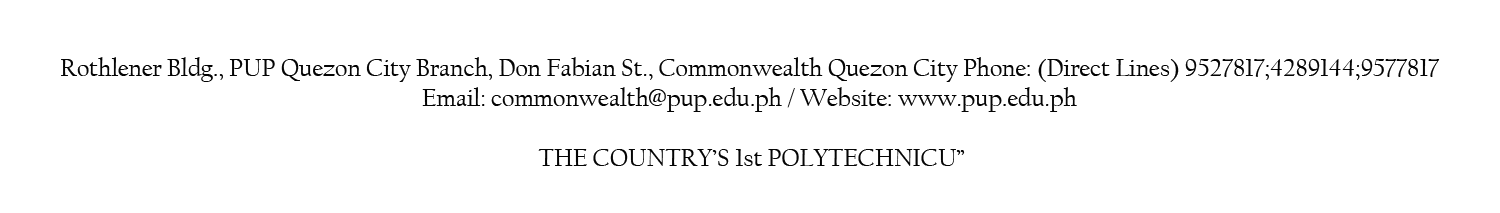
<style>
.page{position:relative;width:1500px;height:213px;background:#ffffff}
.page>*{position:absolute;margin:0}
.t1{font:25px "CalifornianFB-Reg";color:#040404}
</style>
<div class="page">
<p class="t1" style="left:61px;top:57px;width:1379px;height:109px;text-align:center">Rothlener Bldg., PUP Quezon City Branch, Don Fabian St., Commonwealth Quezon City Phone: (Direct Lines) 9527817;4289144;9577817 <br>Email: commonwealth@pup.edu.ph / Website: www.pup.edu.ph <br>  <br>THE COUNTRY’S 1st POLYTECHNICU”</p>
</div>
